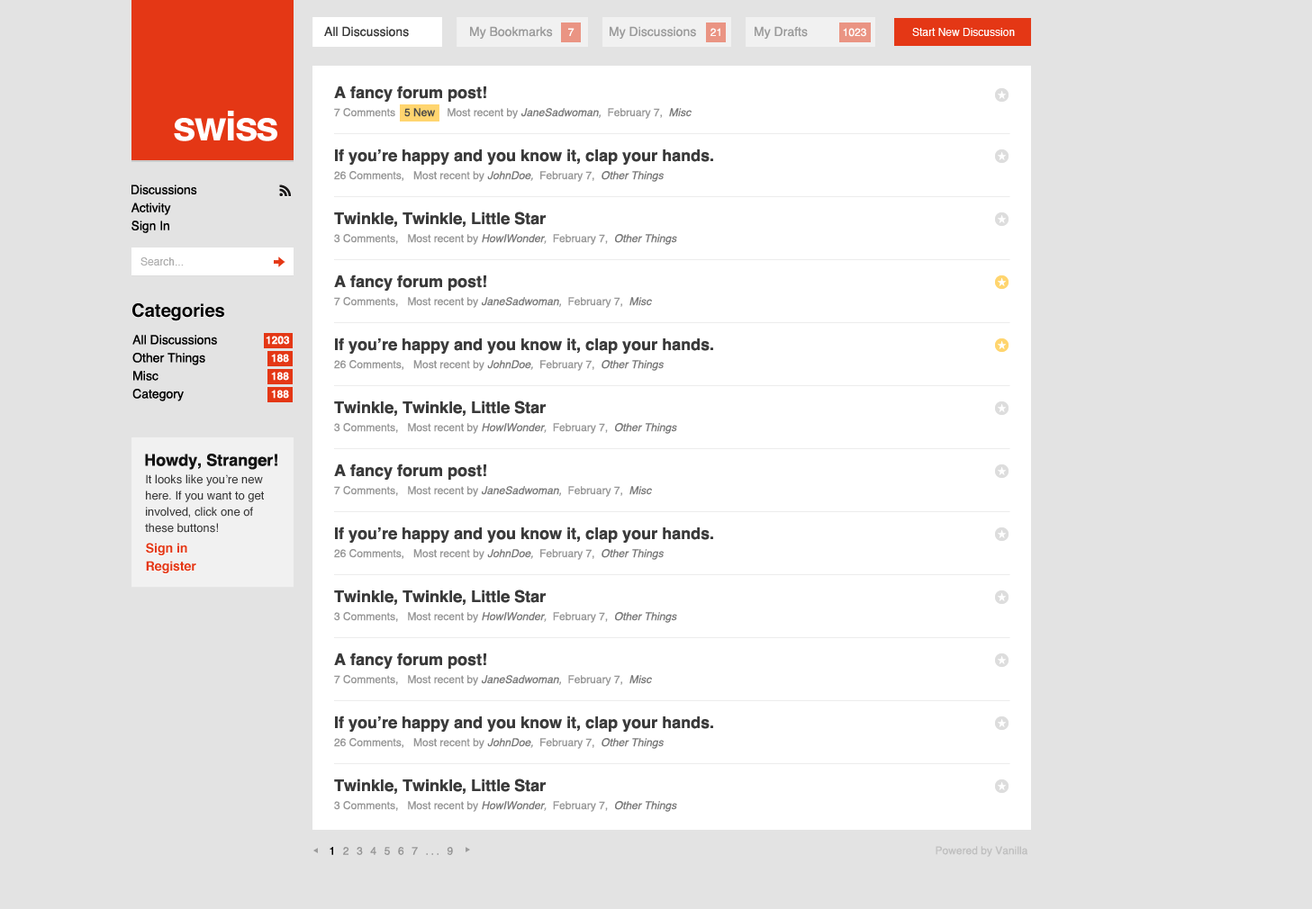
<style>
.page{position:relative;width:1312px;height:909px;background:#e3e3e3}
.page>*{position:absolute;margin:0}
.t1{font:12.6px "Helvetica";color:#3a3a3a}
.t2{font:12.6px "Helvetica";color:#9a9a9a}
.t3{font:10.8px "Helvetica";color:#ffffff}
.t4{font:16.2px/18px "Helvetica-Bold";color:#3a3a3a}
.t5{font:10.8px/18px "Helvetica";color:#979797}
.t6{font:10.8px/18px "Helvetica";color:#474747}
.t7{font:10.8px/18px "Helvetica-Oblique";color:#7a7a7a}
.t8{font:10.8px/18px "Helvetica-Oblique";color:#979797}
.t9{font:41.2px "Helvetica-Bold";letter-spacing:-0.04em;color:#ffffff}
.t10{font:10.8px/18px "Helvetica-Oblique";color:#7b7b7b}
.t11{font:12.6px/18px "Helvetica";color:#000000}
.t12{font:10.8px "Helvetica";color:#adadad}
.t13{font:18px "Helvetica-Bold";color:#000000}
.t14{font:10.8px "Helvetica-Bold";color:#ffffff}
.t15{font:16.2px "Helvetica-Bold";color:#141414}
.t16{font:11.7px/16.2px "Helvetica";color:#393939}
.t17{font:12.6px/18px "Helvetica-Bold";color:#e43715}
.t18{font:10.8px "Helvetica";letter-spacing:0.22em;color:#949494}
.t19{font:10.8px "Helvetica";letter-spacing:0.22em;color:#000000}
.t20{font:10.8px "Helvetica";color:#bfbfbf}
</style>
<div class="page">
<p class="t1" style="left:324px;top:26px;width:85px;height:11px">All Discussions</p>
<p class="t2" style="left:470px;top:26px;width:83px;height:14px">My Bookmarks</p>
<p class="t3" style="left:568px;top:28px;width:6px;height:8px">7</p>
<p class="t2" style="left:609px;top:26px;width:87px;height:14px">My Discussions</p>
<p class="t3" style="left:710px;top:28px;width:10px;height:8px">21</p>
<p class="t2" style="left:754px;top:26px;width:53px;height:14px">My Drafts</p>
<p class="t3" style="left:843px;top:28px;width:23px;height:9px">1023</p>
<p class="t3" style="left:912px;top:28px;width:102px;height:8px">Start New Discussion</p>
<p class="t4" style="left:334px;top:86px;width:357px;height:33px">A fancy forum post!<br><span class="t5">7 Comments   </span><span class="t6">5 New </span><span class="t5">   Most recent by </span><span class="t7">JaneSadwoman</span><span class="t8">,</span><span class="t5">  February 7,  </span><span class="t7">Misc</span></p>
<p class="t9" style="left:174px;top:111px;width:103px;height:30px">swiss</p>
<p class="t4" style="left:334px;top:149px;width:379px;height:33px">If you’re happy and you know it, clap your hands.<br><span class="t5">26 Comments,   Most recent by </span><span class="t10">JohnDoe</span><span class="t8">,</span><span class="t5">  February 7,  </span><span class="t7">Other Things</span></p>
<p class="t11" style="left:131px;top:185px;width:66px;height:48px">Discussions<br>Activity<br>Sign In</p>
<p class="t4" style="left:334px;top:212px;width:343px;height:33px">Twinkle, Twinkle, Little Star<br><span class="t5">3 Comments,   Most recent by </span><span class="t10">HowIWonder</span><span class="t8">,</span><span class="t5">  February 7,  </span><span class="t7">Other Things</span></p>
<p class="t12" style="left:140px;top:257px;width:44px;height:9px">Search...</p>
<p class="t13" style="left:132px;top:303px;width:92px;height:18px">Categories</p>
<p class="t11" style="left:132px;top:335px;width:85px;height:66px">All Discussions<br>Other Things<br>Misc<br>Category</p>
<p class="t14" style="left:266px;top:336px;width:24px;height:9px">1203</p>
<p class="t14" style="left:271px;top:354px;width:18px;height:9px">188</p>
<p class="t14" style="left:271px;top:372px;width:18px;height:9px">188</p>
<p class="t14" style="left:271px;top:390px;width:18px;height:9px">188</p>
<p class="t15" style="left:145px;top:454px;width:132px;height:16px">Howdy, Stranger!</p>
<p class="t16" style="left:145px;top:474px;width:119px;height:59px">It looks like you’re new here. If you want to get involved, click one of these buttons!</p>
<p class="t17" style="left:146px;top:543px;width:50px;height:30px">Sign in <br>Register</p>
<p class="t18" style="left:329px;top:847px;width:124px;height:8px"><span class="t19">1</span> 2 3 4 5 6 7 ... 9</p>
<p class="t20" style="left:935px;top:846px;width:92px;height:11px">Powered by Vanilla</p>
</div>
